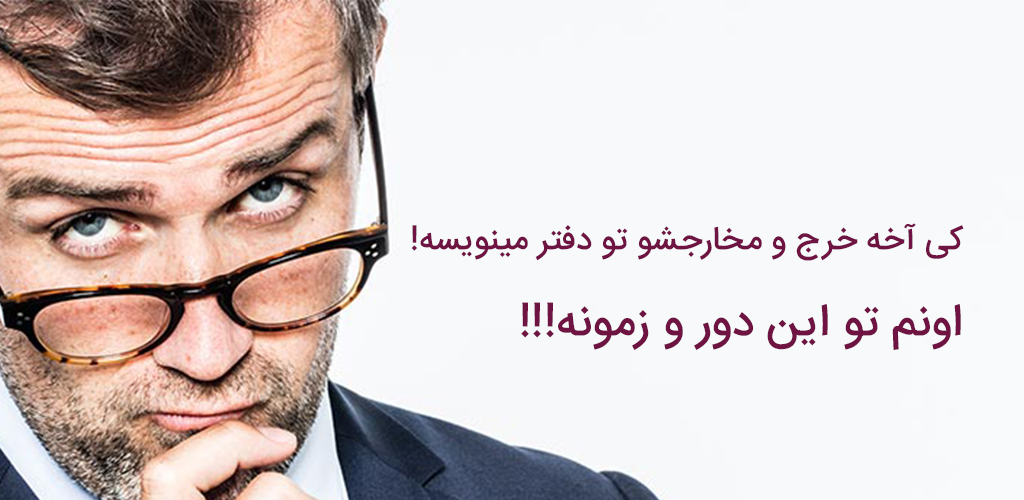
<style>
.page{position:relative;width:1024px;height:500px;background:#f8f9fb}
.page>*{position:absolute;margin:0}
.t1{font:33.3px "IRANSansMobile-Medium";color:#6e1342}
.t2{font:45.8px "IRANSansMobile-Medium";color:#6e1342}
</style>
<div class="page">
<p class="t1" style="left:411px;top:223px;width:553px;height:38px">کی آخه خرج و مخارجشو تو دفتر مینویسه!</p>
<p class="t2" style="left:521px;top:302px;width:440px;height:48px">اونم تو این دور و زمونه!!!</p>
</div>
